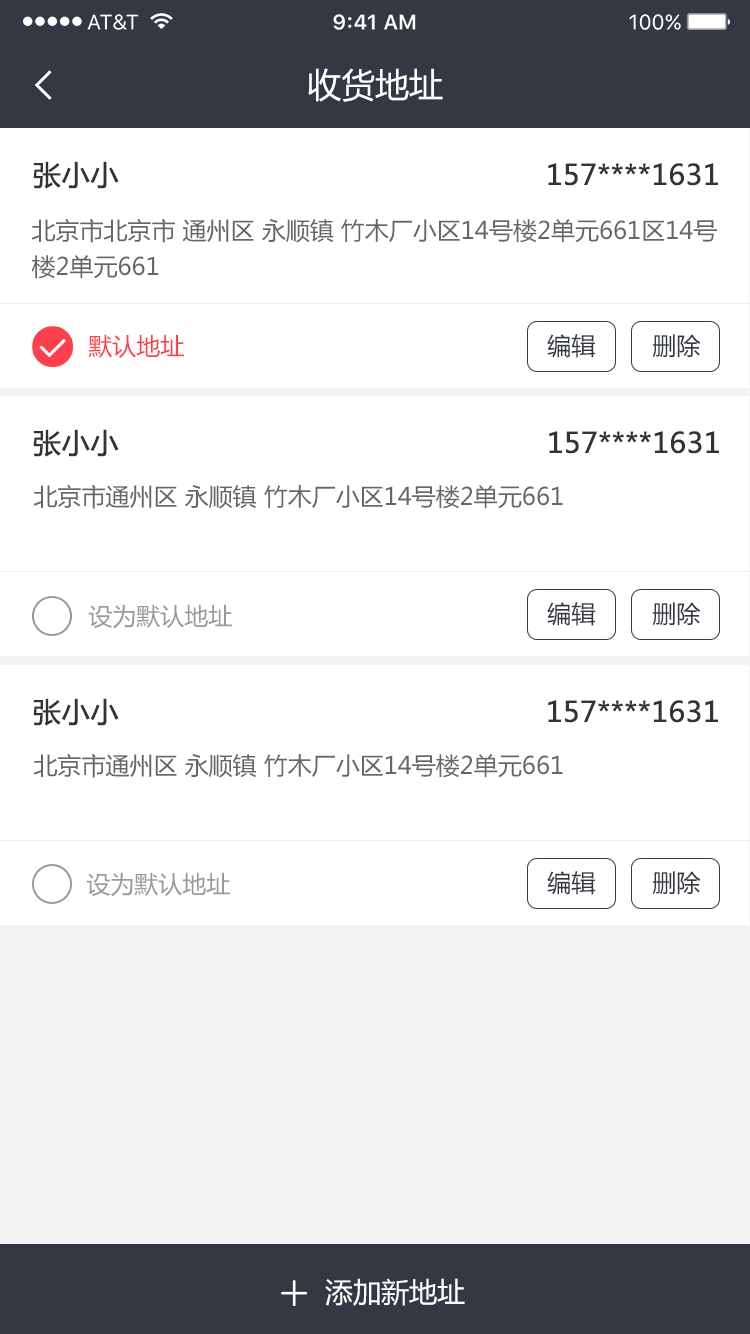
<style>
.page{position:relative;width:750px;height:1334px;background:#ffffff}
.page>*{position:absolute;margin:0}
.t1{font:34px "MicrosoftYaHei";color:#ffffff}
.t2{font:28px "MicrosoftYaHei";color:#333333;font-weight:bold}
.t3{font:24px/36px "MicrosoftYaHei";color:#666666}
.t4{font:24px "MicrosoftYaHei";color:#fe404c}
.t5{font:24px "MicrosoftYaHei";color:#343843}
.t6{font:24px "MicrosoftYaHei";color:#666666}
.t7{font:24px "MicrosoftYaHei";color:#999999}
.t8{font:28px "MicrosoftYaHei";color:#ffffff}
</style>
<div class="page">
<p class="t1" style="left:308px;top:68px;width:135px;height:34px">收货地址</p>
<p class="t2" style="left:33px;top:161px;width:86px;height:28px">张小小</p>
<p class="t2" style="left:548px;top:163px;width:170px;height:23px">157****1631</p>
<p class="t3" style="left:31px;top:218px;width:686px;height:61px">北京市北京市 通州区 永顺镇 竹木厂小区14号楼2单元661区14号<br>楼2单元661</p>
<p class="t4" style="left:88px;top:334px;width:96px;height:24px">默认地址</p>
<p class="t5" style="left:547px;top:334px;width:154px;height:24px">编辑        删除</p>
<p class="t2" style="left:33px;top:429px;width:86px;height:28px">张小小</p>
<p class="t2" style="left:549px;top:431px;width:170px;height:23px">157****1631</p>
<p class="t6" style="left:33px;top:484px;width:530px;height:25px">北京市通州区 永顺镇 竹木厂小区14号楼2单元661</p>
<p class="t7" style="left:88px;top:604px;width:144px;height:25px">设为默认地址</p>
<p class="t5" style="left:547px;top:602px;width:154px;height:24px">编辑        删除</p>
<p class="t2" style="left:33px;top:698px;width:86px;height:28px">张小小</p>
<p class="t2" style="left:548px;top:700px;width:170px;height:23px">157****1631</p>
<p class="t6" style="left:33px;top:753px;width:530px;height:25px">北京市通州区 永顺镇 竹木厂小区14号楼2单元661</p>
<p class="t7" style="left:86px;top:872px;width:144px;height:25px">设为默认地址</p>
<p class="t5" style="left:547px;top:871px;width:154px;height:24px">编辑        删除</p>
<p class="t8" style="left:325px;top:1278px;width:140px;height:28px">添加新地址</p>
</div>
